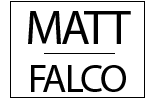
<style>
.page{position:relative;width:154px;height:100px;background:#ffffff}
.page>*{position:absolute;margin:0}
.t1{font:40px "MyriadPro-Regular";letter-spacing:-0.05em;color:#000000}
.t2{font:48px "MyriadPro-Regular";letter-spacing:-0.05em;color:#000000}
</style>
<div class="page">
<p class="t1" style="left:28px;top:11px;width:103px;height:81px;text-align:center"><span class="t2">MATT<br></span>FALCO</p>
</div>
